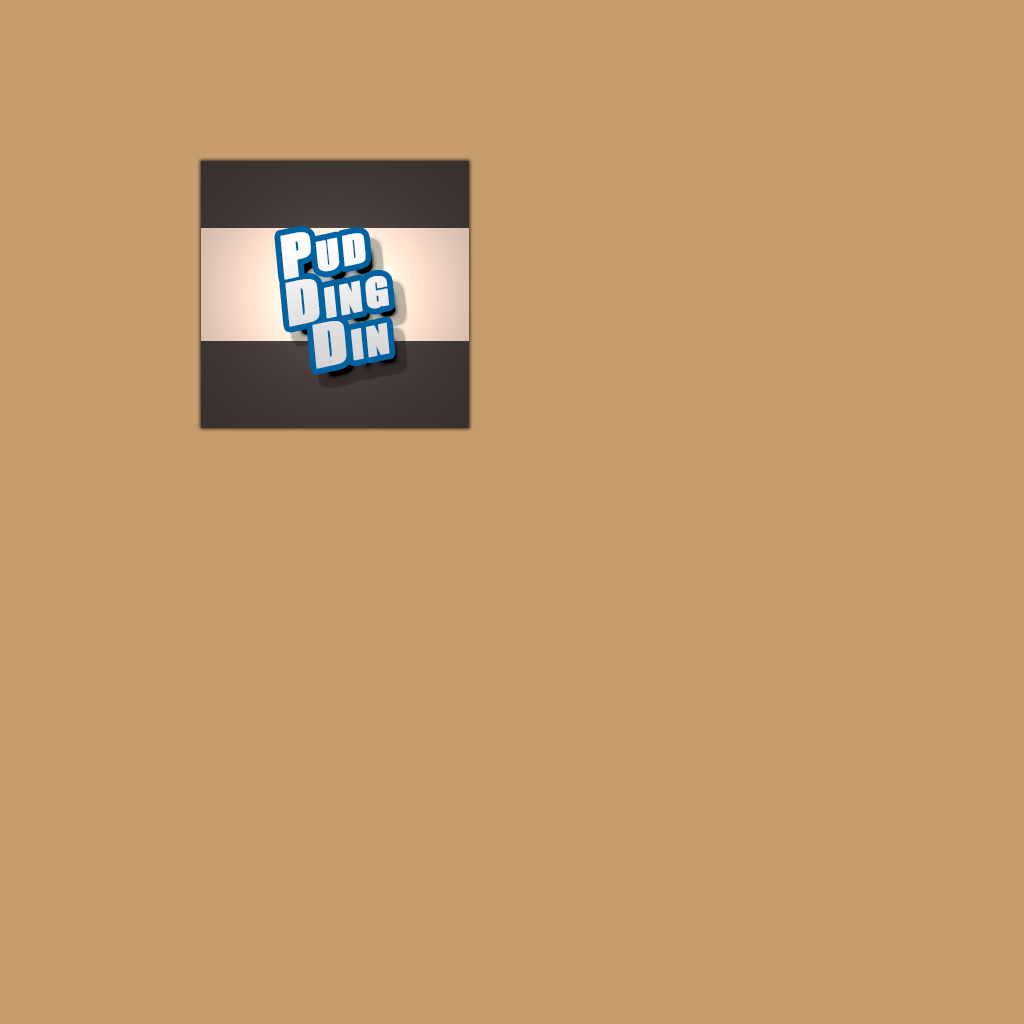
<style>
.page{position:relative;width:1024px;height:1024px;background:#c69c6d}
.page>*{position:absolute;margin:0}
.t1{font:53.8px/47.1px "Impact";letter-spacing:0.04em;color:#ffffff;font-variant:small-caps;font-weight:bold;font-style:italic;scale:1.16 1}
</style>
<div class="page">
<p class="t1" style="left:280px;top:232px;width:110px;height:137px;text-align:center;rotate:-12deg">Pud<br>Ding<br>Din</p>
</div>
